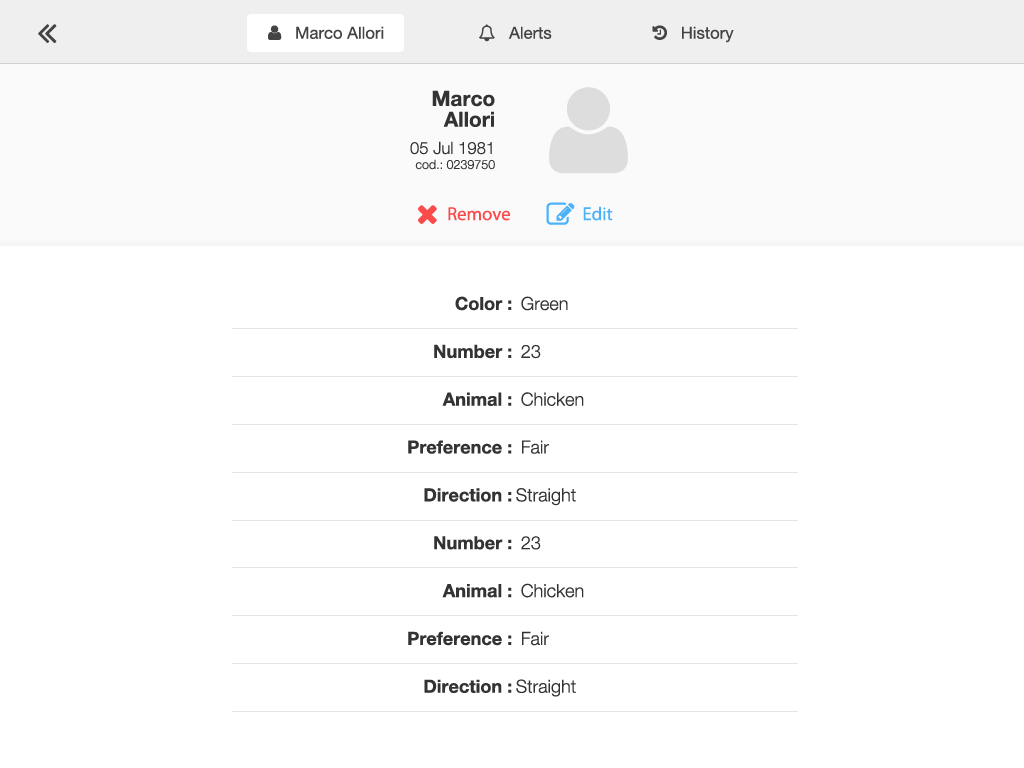
<style>
.page{position:relative;width:1024px;height:768px;background:#ffffff}
.page>*{position:absolute;margin:0}
.t1{font:20.8px/20.8px "HelveticaNeue-Bold";color:#333333}
.t2{font:12.5px "HelveticaNeue-Light";color:#333333}
.t3{font:16.7px/20.8px "HelveticaNeue-Light";color:#333333}
.t4{font:18.7px "MyriadPro-Regular";color:#fa4b4c}
.t5{font:18.7px "MyriadPro-Regular";color:#4bb2fa}
.t6{font:18.1px "HelveticaNeue-Bold";color:#333333}
.t7{font:18.1px "HelveticaNeue-Light";color:#333333}
</style>
<div class="page">
<p class="t1" style="left:432px;top:90px;width:63px;height:37px;text-align:right">Marco<br>Allori</p>
<p class="t2" style="left:410px;top:141px;width:85px;height:29px;text-align:right"><span class="t3">05 Jul 1981<br></span>cod.: 0239750</p>
<p class="t4" style="left:448px;top:207px;width:62px;height:14px">Remove</p>
<p class="t5" style="left:583px;top:206px;width:30px;height:15px">Edit</p>
<p class="t6" style="left:455px;top:296px;width:57px;height:15px">Color :</p>
<p class="t7" style="left:521px;top:296px;width:47px;height:15px">Green</p>
<p class="t6" style="left:434px;top:344px;width:78px;height:15px">Number :</p>
<p class="t7" style="left:521px;top:344px;width:20px;height:15px">23</p>
<p class="t6" style="left:442px;top:392px;width:70px;height:14px">Animal :</p>
<p class="t7" style="left:521px;top:392px;width:63px;height:14px">Chicken</p>
<p class="t6" style="left:408px;top:440px;width:104px;height:14px">Preference :</p>
<p class="t7" style="left:522px;top:440px;width:27px;height:14px">Fair</p>
<p class="t6" style="left:424px;top:488px;width:88px;height:14px">Direction :</p>
<p class="t7" style="left:516px;top:488px;width:60px;height:18px">Straight</p>
<p class="t6" style="left:434px;top:536px;width:78px;height:14px">Number :</p>
<p class="t7" style="left:521px;top:536px;width:20px;height:14px">23</p>
<p class="t6" style="left:442px;top:584px;width:70px;height:14px">Animal :</p>
<p class="t7" style="left:521px;top:583px;width:63px;height:15px">Chicken</p>
<p class="t6" style="left:408px;top:631px;width:104px;height:15px">Preference :</p>
<p class="t7" style="left:522px;top:631px;width:27px;height:15px">Fair</p>
<p class="t6" style="left:424px;top:679px;width:88px;height:14px">Direction :</p>
<p class="t7" style="left:516px;top:679px;width:60px;height:18px">Straight</p>
</div>
